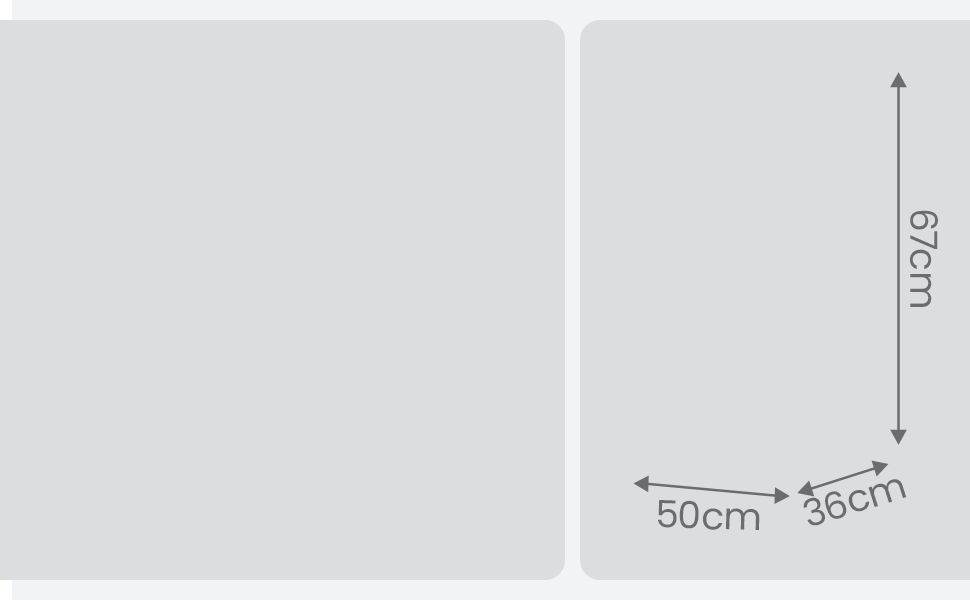
<style>
.page{position:relative;width:970px;height:600px;background:#dcdddf}
.page>*{position:absolute;margin:0}
.t1{font:37.5px "Poppins-Regular";color:#6c6c6c}
</style>
<div class="page">
<p class="t1" style="left:910px;top:210px;width:28px;height:97px;rotate:90deg">67cm</p>
<p class="t1" style="left:803px;top:479px;width:104px;height:47px;rotate:-18deg">36cm</p>
<p class="t1" style="left:658px;top:500px;width:102px;height:30px;rotate:2deg">50cm</p>
</div>
